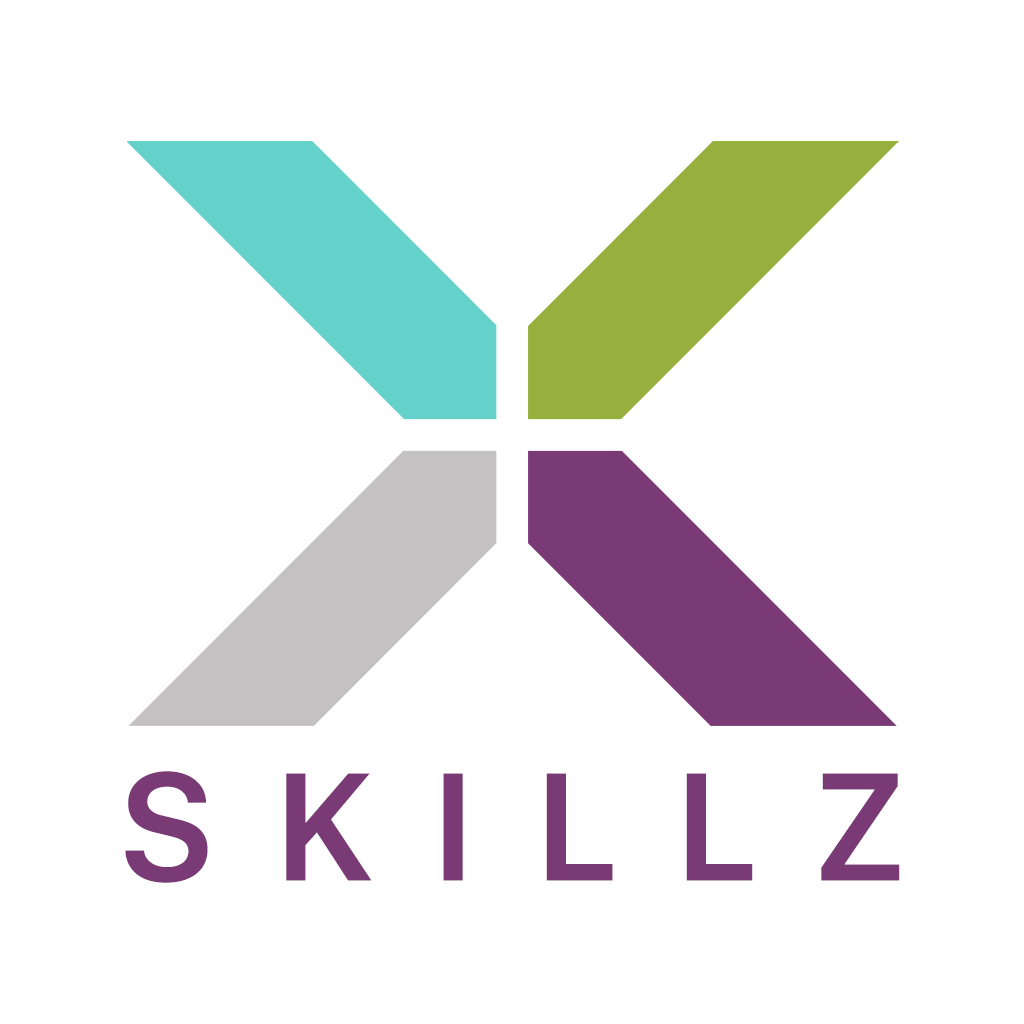
<style>
.page{position:relative;width:1024px;height:1024px;background:#ffffff}
.page>*{position:absolute;margin:0}
.t1{font:160px "SanFranciscoDisplay-Semibold";letter-spacing:0.38em;color:#7a3a76}
</style>
<div class="page">
<p class="t1" style="left:125px;top:771px;width:775px;height:112px">SKILLZ</p>
</div>
